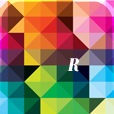
<style>
.page{position:relative;width:114px;height:114px}
.page>*{position:absolute;margin:0}
.t1{font:18px "BodoniBE-BoldCnItalic";color:#ffffff}
</style>
<div class="page">
<p class="t1" style="left:67px;top:58px;width:12px;height:14px">R</p>
</div>
